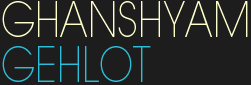
<style>
.page{position:relative;width:251px;height:85px;background:#1d1d1d}
.page>*{position:absolute;margin:0}
.t1{font:47.6px "ITCAvantGardeStd-XLt";color:#ffffcc;scale:0.84 1}
.t2{font:47.6px "ITCAvantGardeStd-XLt";color:#2cbdd8;scale:0.84 1}
</style>
<div class="page">
<p class="t1" style="left:2px;top:1px;width:246px;height:36px">GHANSHYAM</p>
<p class="t2" style="left:2px;top:46px;width:149px;height:36px">GEHLOT</p>
</div>
